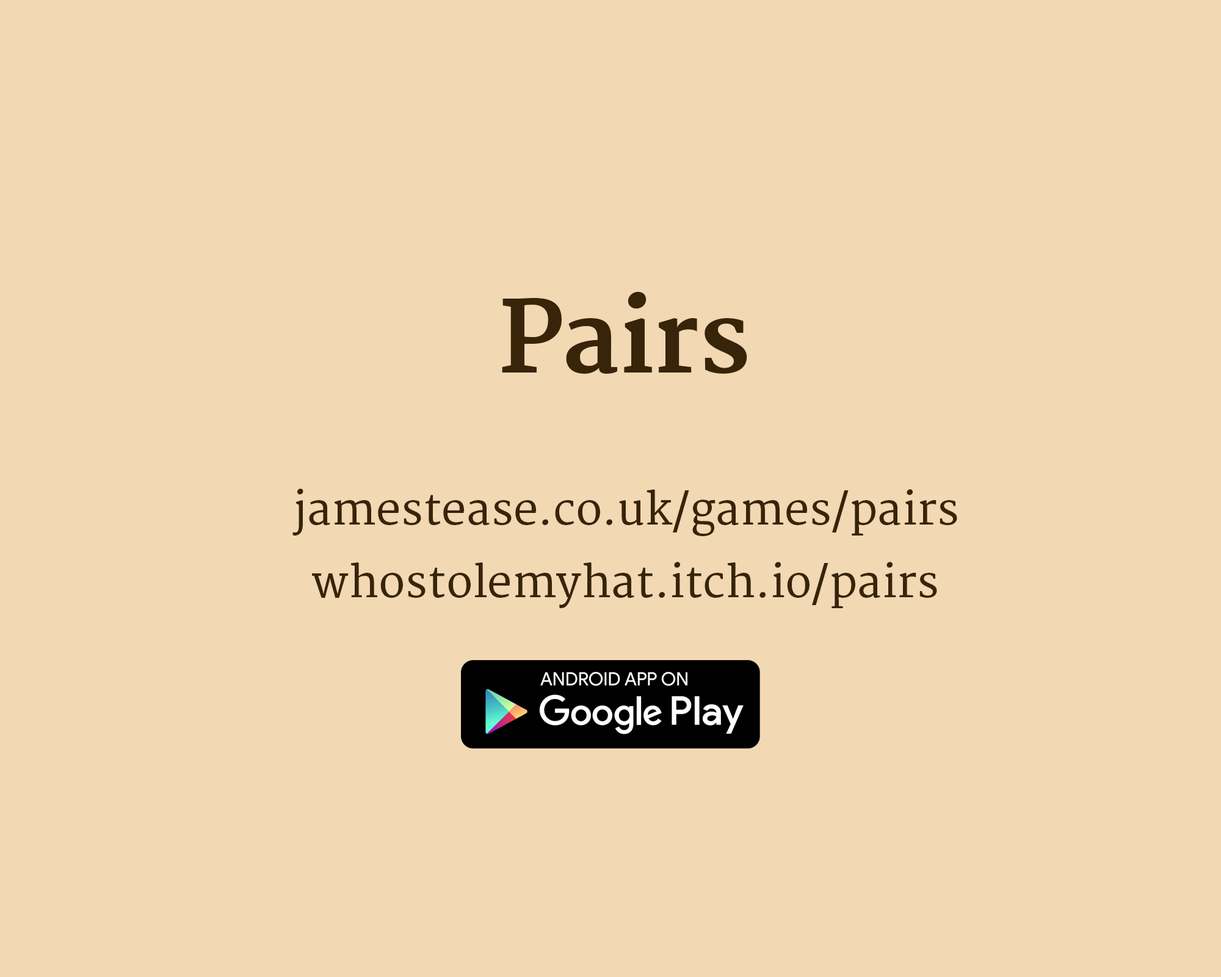
<style>
.page{position:relative;width:1221px;height:977px;background:#f2d8b3}
.page>*{position:absolute;margin:0}
.t1{font:97.7px "Merriweather-Bold";color:#372409}
.t2{font:44px "Merriweather";color:#372409}
</style>
<div class="page">
<p class="t1" style="left:502px;top:291px;width:245px;height:83px">Pairs</p>
<p class="t2" style="left:292px;top:488px;width:665px;height:48px">jamestease.co.uk/games/pairs</p>
<p class="t2" style="left:312px;top:562px;width:625px;height:46px">whostolemyhat.itch.io/pairs</p>
</div>
